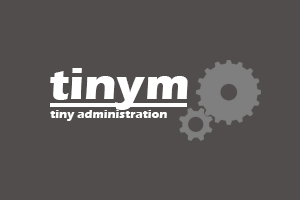
<style>
.page{position:relative;width:300px;height:200px;background:#524d4d}
.page>*{position:absolute;margin:0}
.t1{font:45.1px "ErasITC-Bold";color:#ffffff;scale:1.06 1}
.t2{font:12px "ErasITC-Bold";color:#ffffff}
</style>
<div class="page">
<p class="t1" style="left:50px;top:68px;width:138px;height:42px">tinym</p>
<p class="t2" style="left:50px;top:110px;width:117px;height:11px">tiny administration</p>
</div>
